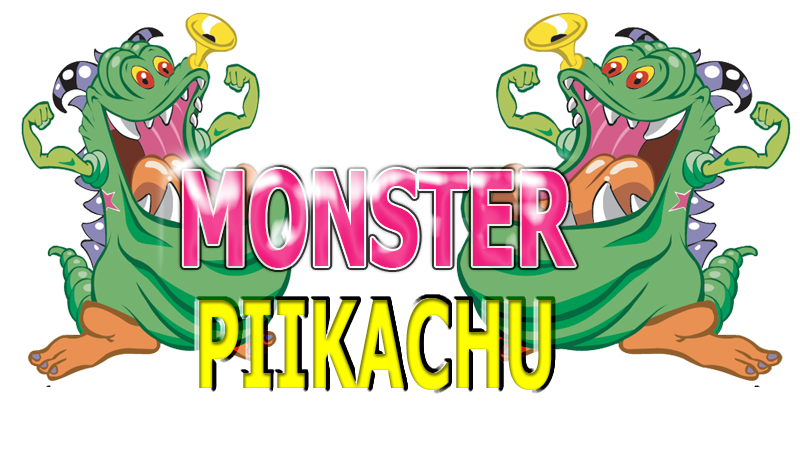
<style>
.page{position:relative;width:800px;height:450px;background:#ffffff}
.page>*{position:absolute;margin:0}
.t1{font:129.6px "Tahoma-Bold";scale:0.61 1}
.t2{font:121.3px "Tahoma-Bold";scale:0.58 1}
</style>
<div class="page">
<p class="t1" style="left:183px;top:169px;width:392px;height:99px">MONSTER</p>
<p class="t2" style="left:199px;top:298px;width:353px;height:92px">PIIKACHU</p>
</div>
